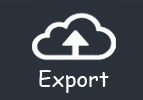
<style>
.page{position:relative;width:143px;height:100px;background:#2a313b}
.page>*{position:absolute;margin:0}
.t1{font:22px "ComicSansMS";color:#fafafb}
</style>
<div class="page">
<p class="t1" style="left:39px;top:70px;width:70px;height:23px">Export</p>
</div>
